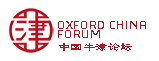
<style>
.page{position:relative;width:159px;height:61px;background:#ffffff}
.page>*{position:absolute;margin:0}
.t1{font:12.5px/9.4px "3ds";color:#b6141f}
.t2{font:12.5px "LiSu";color:#b6141f}
</style>
<div class="page">
<p class="t1" style="left:58px;top:21px;width:88px;height:17px">OXFORD CHINA <br>FORUM</p>
<p class="t2" style="left:59px;top:43px;width:73px;height:8px">中国牛津论坛</p>
</div>
